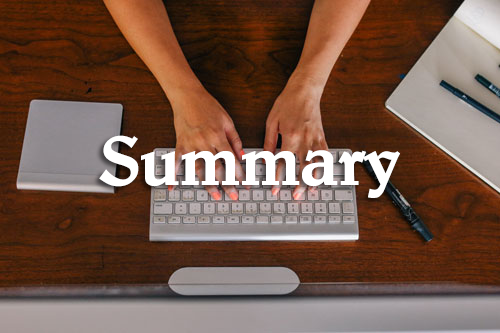
<style>
.page{position:relative;width:500px;height:333px}
.page>*{position:absolute;margin:0}
.t1{font:72px "Belwe-Bold";color:#ffffff}
</style>
<div class="page">
<p class="t1" style="left:99px;top:135px;width:301px;height:63px">Summary</p>
</div>
